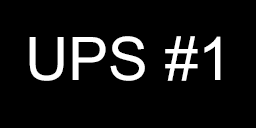
<style>
.page{position:relative;width:256px;height:128px;background:#000000}
.page>*{position:absolute;margin:0}
.t1{font:60px "ArialMT";color:#ffffff}
.t2{font:48px "ArialMT";color:#ffffff}
</style>
<div class="page">
<p class="t1" style="left:29px;top:36px;width:192px;height:45px"><span class="t2"><br><br></span>UPS #1</p>
</div>
